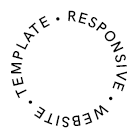
<style>
.page{position:relative;width:138px;height:138px;background:#ffffff}
.page>*{position:absolute;margin:0}
.t1{font:15px "HKGrotesk-SemiBold";letter-spacing:0.054em;color:#010101;text-transform:uppercase}
</style>
<div class="page">
<p class="t1" style="left:11px;top:10px;width:116px;height:118px">Responsive • website • template •</p>
</div>
